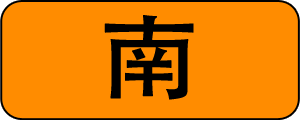
<style>
.page{position:relative;width:300px;height:120px;background:#ff8c00}
.page>*{position:absolute;margin:0}
.t1{font:92px "AdobeHeitiStd-Regular";letter-spacing:0.02em;color:#000000;font-weight:bold;scale:1.11 1}
</style>
<div class="page">
<p class="t1" style="left:104px;top:15px;width:90px;height:85px">南</p>
</div>
